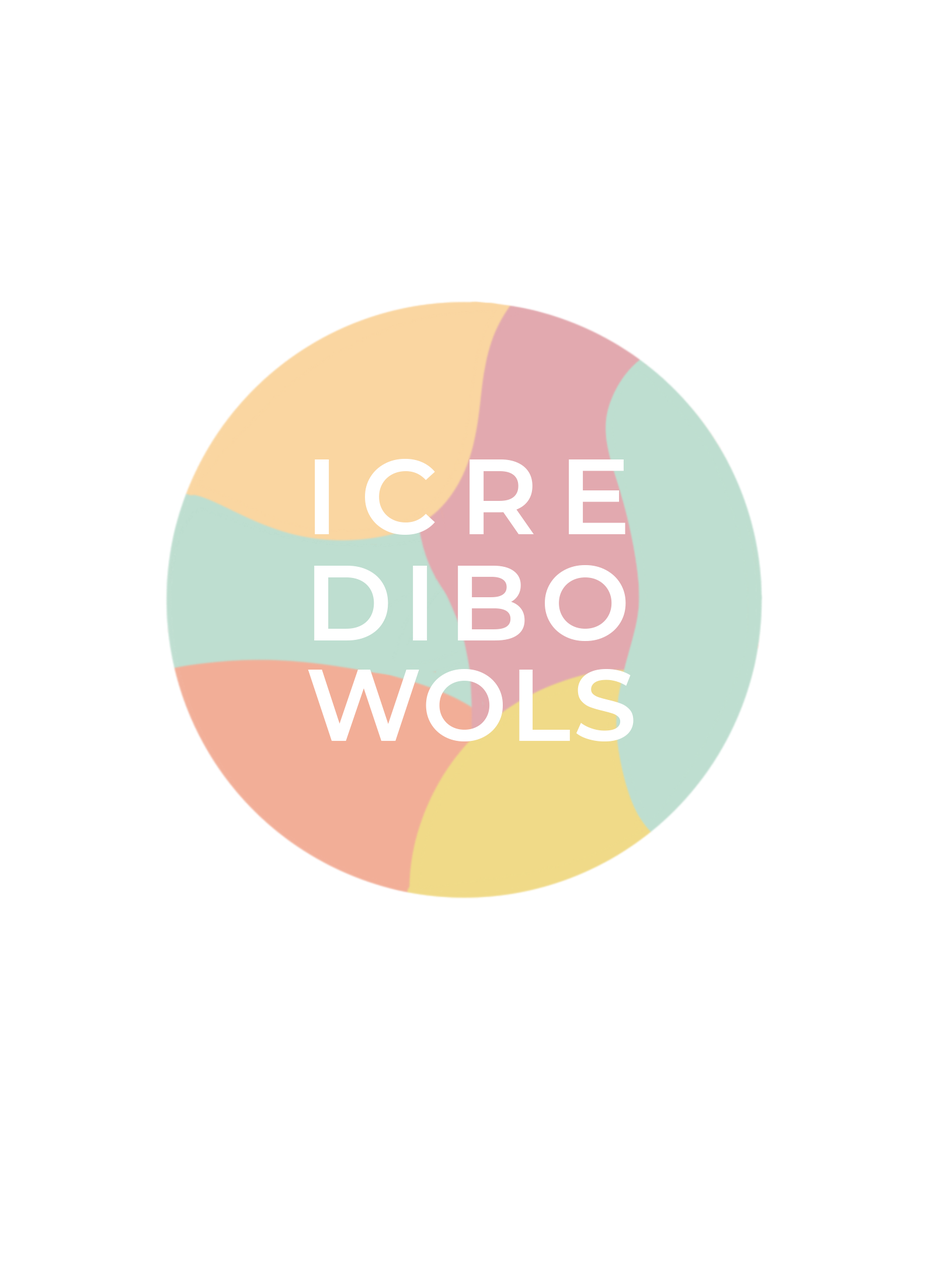
<style>
.page{position:relative;width:946px;height:1261px;background:#ffffff}
.page>*{position:absolute;margin:0}
.t1{font:107px "Montserrat-SemiBold";letter-spacing:0.2em;color:#ffffff}
.t2{font:107px "Montserrat-SemiBold";letter-spacing:0.1em;color:#ffffff}
.t3{font:101.7px "Montserrat-SemiBold";letter-spacing:0.025em;color:#ffffff}
</style>
<div class="page">
<p class="t1" style="left:315px;top:459px;width:310px;height:76px">ICRE</p>
<p class="t2" style="left:314px;top:565px;width:312px;height:76px">DIBO</p>
<p class="t3" style="left:308px;top:669px;width:325px;height:72px">WOLS</p>
</div>
